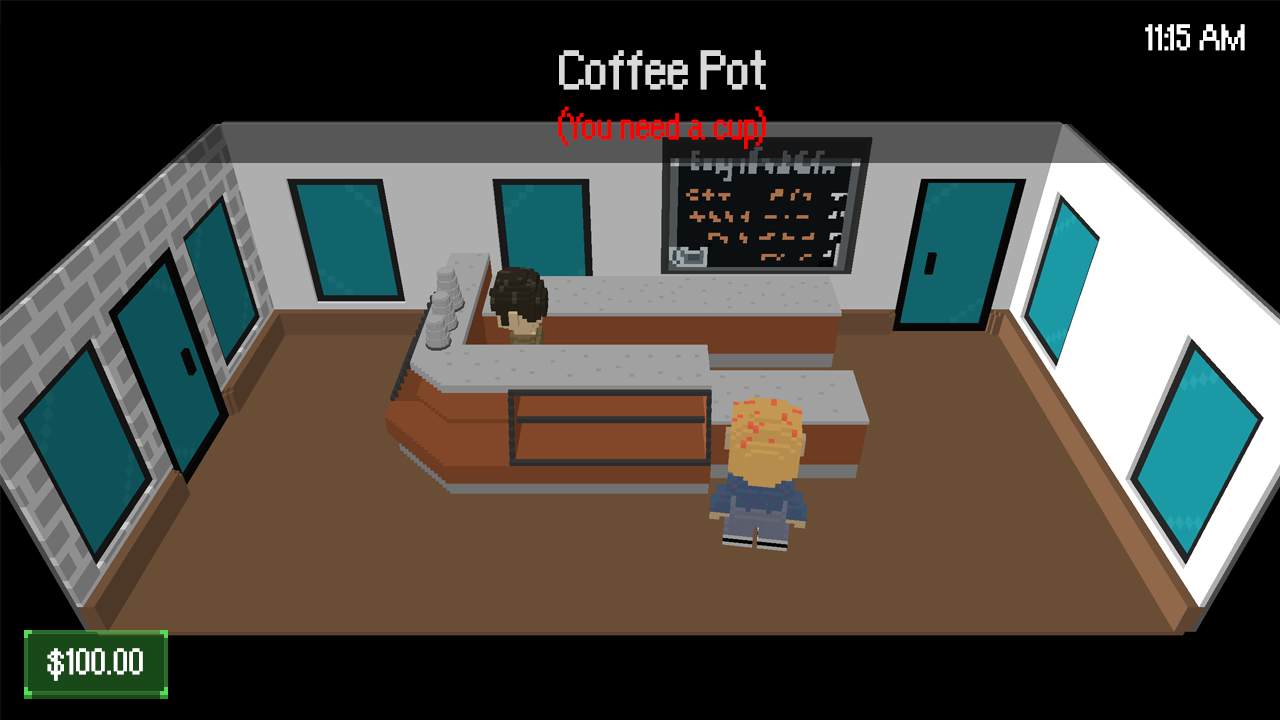
<style>
.page{position:relative;width:1280px;height:720px;background:#000000}
.page>*{position:absolute;margin:0}
.t1{font:40px "OrangeKid";letter-spacing:-0.01em;color:#ffffff}
.t2{font:40px/50px "OrangeKid";letter-spacing:-0.01em;color:#ff0000}
.t3{font:60px/50px "OrangeKid";letter-spacing:-0.01em;color:#dadada}
</style>
<div class="page">
<p class="t1" style="left:1145px;top:24px;width:100px;height:27px">11:15 AM</p>
<p class="t2" style="left:558px;top:50px;width:208px;height:99px;text-align:center"><span class="t3">Coffee Pot<br></span>(You need a cup)</p>
<p class="t1" style="left:47px;top:648px;width:96px;height:33px">$100.00</p>
</div>
